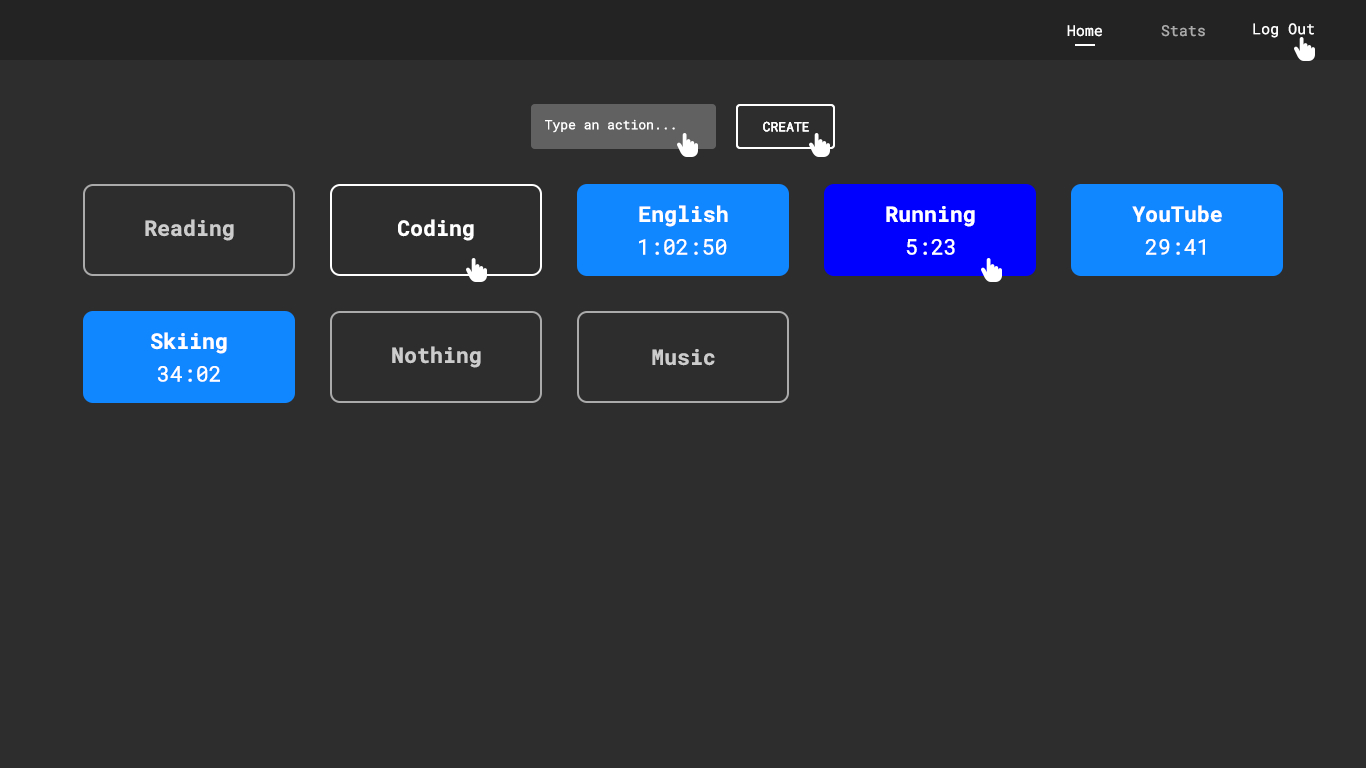
<style>
.page{position:relative;width:1366px;height:768px;background:#2d2d2d}
.page>*{position:absolute;margin:0}
.t1{font:15px "RobotoMono-Regular";color:#ffffff}
.t2{font:15px "RobotoMono-Regular";color:#aaaaaa}
.t3{font:13px "RobotoMono-Regular";color:#ffffff}
.t4{font:21.5px "RobotoMono-Bold";color:#ffffff}
.t5{font:21.5px "RobotoMono-Bold";color:#cccccc}
.t6{font:21.5px "RobotoMono-Regular";color:#ffffff}
</style>
<div class="page">
<p class="t1" style="left:1067px;top:25px;width:35px;height:12px">Home</p>
<p class="t1" style="left:1067px;top:25px;width:35px;height:12px">Home</p>
<p class="t2" style="left:1161px;top:25px;width:44px;height:12px">Stats</p>
<p class="t2" style="left:1161px;top:25px;width:44px;height:12px">Stats</p>
<p class="t1" style="left:1253px;top:23px;width:61px;height:15px">Log Out</p>
<p class="t1" style="left:1253px;top:23px;width:61px;height:15px">Log Out</p>
<p class="t3" style="left:545px;top:119px;width:130px;height:14px">Type an action...</p>
<p class="t3" style="left:763px;top:121px;width:46px;height:11px">CREATE</p>
<p class="t3" style="left:763px;top:121px;width:46px;height:11px">CREATE</p>
<p class="t4" style="left:639px;top:205px;width:89px;height:22px">English</p>
<p class="t4" style="left:886px;top:206px;width:89px;height:21px">Running</p>
<p class="t4" style="left:1132px;top:205px;width:90px;height:18px">YouTube</p>
<p class="t5" style="left:145px;top:219px;width:89px;height:22px">Reading</p>
<p class="t4" style="left:398px;top:219px;width:76px;height:22px">Coding</p>
<p class="t6" style="left:639px;top:238px;width:88px;height:17px">1:02:50</p>
<p class="t6" style="left:906px;top:239px;width:49px;height:16px">5:23</p>
<p class="t6" style="left:1145px;top:239px;width:60px;height:16px">29:41</p>
<p class="t4" style="left:151px;top:332px;width:76px;height:22px">Skiing</p>
<p class="t5" style="left:392px;top:346px;width:89px;height:22px">Nothing</p>
<p class="t5" style="left:652px;top:349px;width:63px;height:17px">Music</p>
<p class="t6" style="left:157px;top:366px;width:63px;height:16px">34:02</p>
</div>
